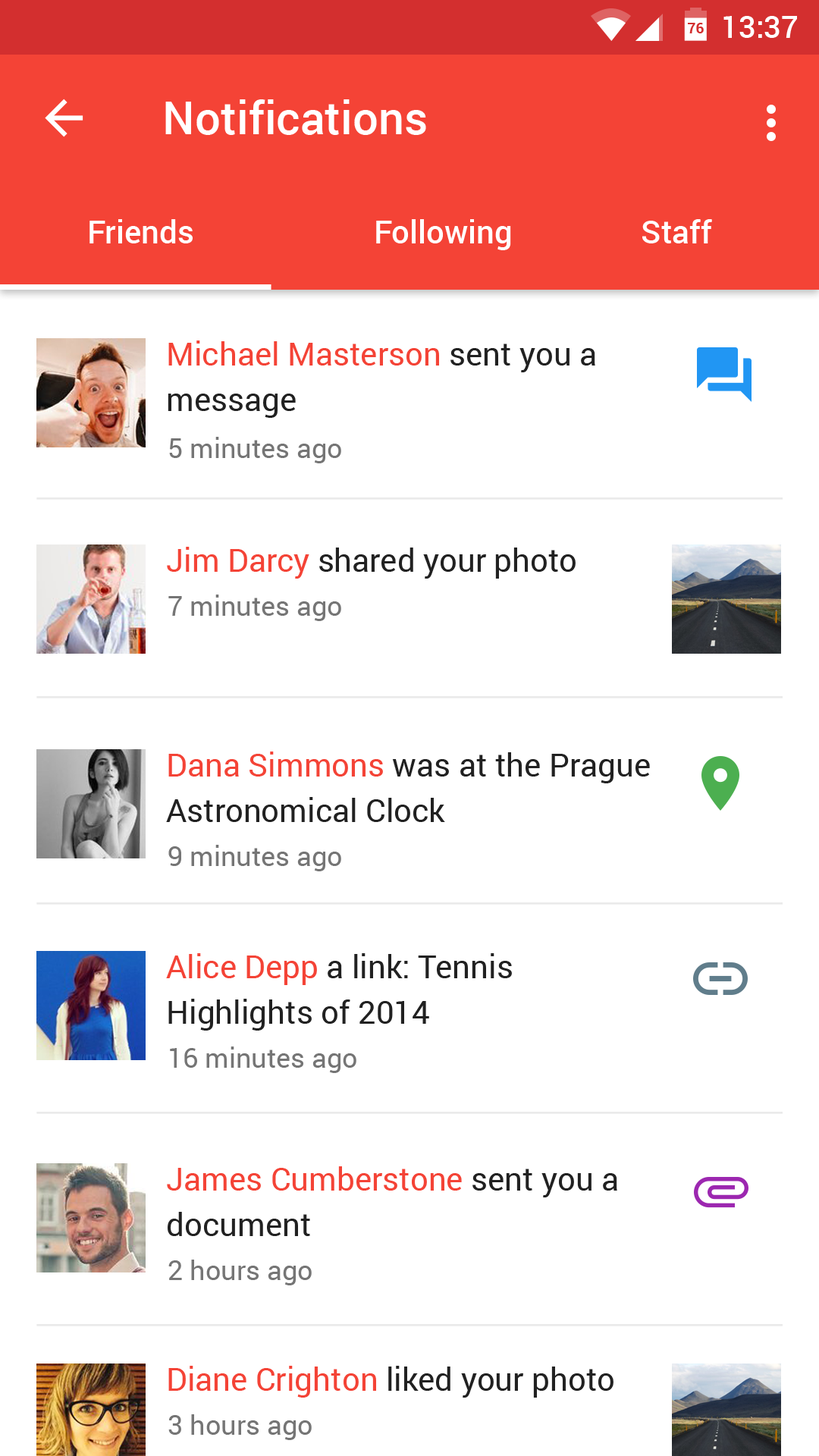
<style>
.page{position:relative;width:819px;height:1456px;background:#ffffff}
.page>*{position:absolute;margin:0}
.t1{font:30.3px "Roboto-Medium";color:#ffffff}
.t2{font:14.4px "Roboto-Bold";color:#d32f2f}
.t3{font:45.5px "Roboto-Medium";color:#ffffff}
.t4{font:31.8px "Roboto-Medium";color:#ffffff}
.t5{font:31.8px/45.5px "Roboto-Regular";color:#212121}
.t6{font:31.8px/45.5px "Roboto-Regular";color:#f44336}
.t7{font:27.3px "Roboto-Regular";color:#757575}
.t8{font:31.8px "Roboto-Regular";color:#212121}
.t9{font:31.8px "Roboto-Regular";color:#f44336}
</style>
<div class="page">
<p class="t1" style="left:723px;top:16px;width:74px;height:22px">13:37</p>
<p class="t2" style="left:688px;top:23px;width:16px;height:10px">76</p>
<p class="t3" style="left:165px;top:99px;width:261px;height:36px">Notifications</p>
<p class="t4" style="left:89px;top:219px;width:104px;height:24px">Friends</p>
<p class="t4" style="left:376px;top:219px;width:135px;height:31px">Following</p>
<p class="t4" style="left:642px;top:219px;width:70px;height:24px">Staff</p>
<p class="t5" style="left:168px;top:340px;width:427px;height:78px"><span class="t6">Michael Masterson</span> sent you a <br>message</p>
<p class="t7" style="left:169px;top:437px;width:172px;height:26px">5 minutes ago</p>
<p class="t8" style="left:167px;top:547px;width:409px;height:32px"><span class="t9">Jim Darcy</span> shared your photo</p>
<p class="t7" style="left:168px;top:595px;width:173px;height:26px">7 minutes ago</p>
<p class="t5" style="left:166px;top:751px;width:484px;height:71px"><span class="t6">Dana Simmons</span> was at the Prague <br>Astronomical Clock</p>
<p class="t7" style="left:168px;top:845px;width:173px;height:26px">9 minutes ago</p>
<p class="t5" style="left:166px;top:953px;width:346px;height:78px"><span class="t6">Alice Depp</span> a link: Tennis <br>Highlights of 2014</p>
<p class="t7" style="left:170px;top:1046px;width:186px;height:27px">16 minutes ago</p>
<p class="t5" style="left:167px;top:1166px;width:450px;height:70px"><span class="t6">James Cumberstone</span> sent you a <br>document</p>
<p class="t7" style="left:168px;top:1260px;width:144px;height:25px">2 hours ago</p>
<p class="t8" style="left:168px;top:1366px;width:445px;height:32px"><span class="t9">Diane Crighton</span> liked your photo</p>
<p class="t7" style="left:168px;top:1414px;width:144px;height:26px">3 hours ago</p>
</div>
